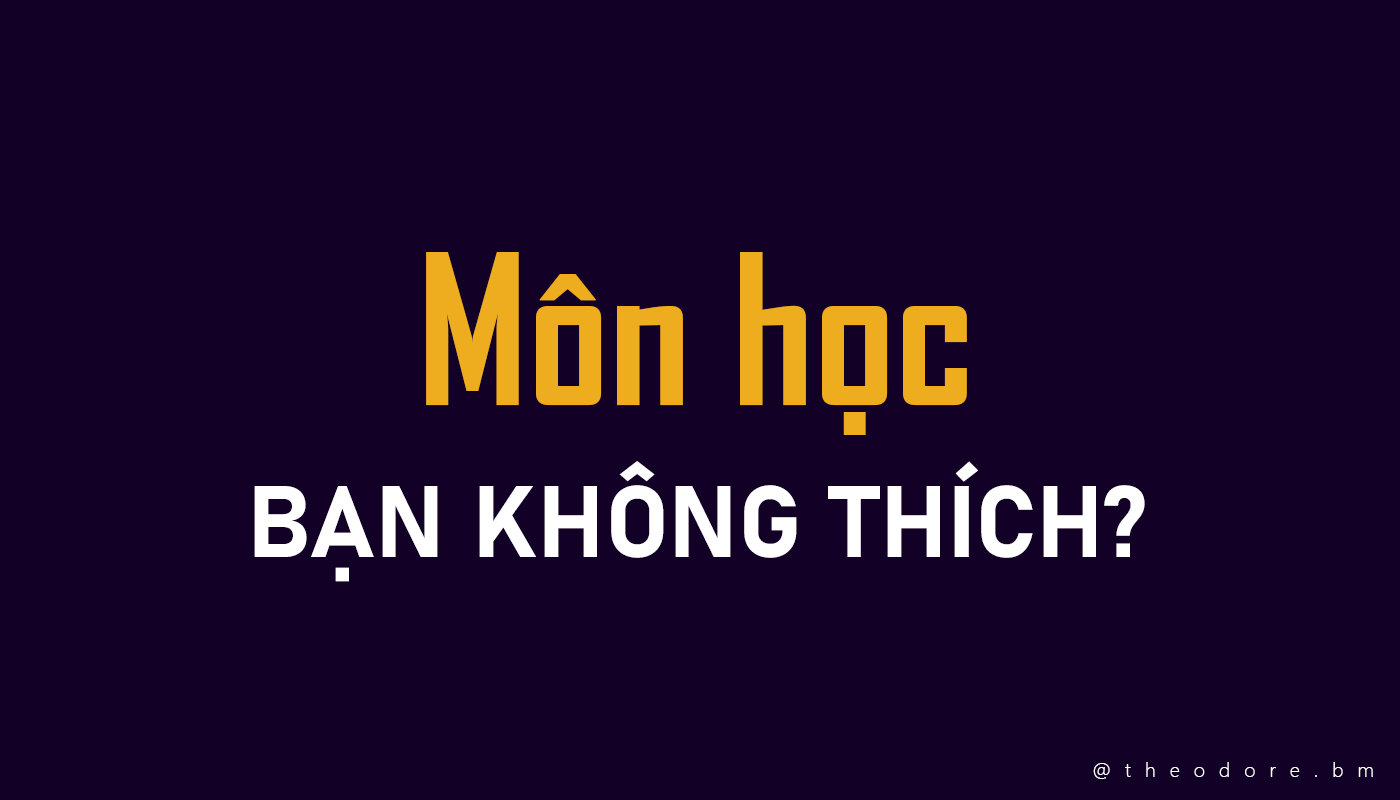
<style>
.page{position:relative;width:1400px;height:800px;background:#120026}
.page>*{position:absolute;margin:0}
.t1{font:200px "SVN-AgencyFBbold";color:#eead1f}
.t2{font:100px "Bahnschrift-Bold";color:#ffffff}
.t3{font:20px "SegoeUI-Light";letter-spacing:0.7em;color:#ffffff}
</style>
<div class="page">
<p class="t1" style="left:426px;top:252px;width:541px;height:183px">Môn học</p>
<p class="t2" style="left:254px;top:461px;width:891px;height:121px">BẠN KHÔNG THÍCH?</p>
<p class="t3" style="left:1093px;top:762px;width:280px;height:17px">@theodore.bm</p>
</div>
